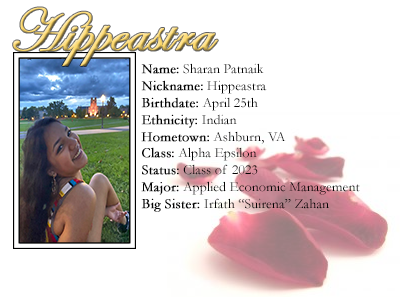
<style>
.page{position:relative;width:400px;height:300px;background:#ffffff}
.page>*{position:absolute;margin:0}
.t1{font:60px "EdwardianScriptITC";font-weight:bold}
.t2{font:14px "Garamond";color:#000000}
.t3{font:14px "Garamond";color:#000000;font-weight:bold}
</style>
<div class="page">
<p class="t1" style="left:13px;top:7px;width:205px;height:59px">Hippeastra</p>
<p class="t2" style="left:141px;top:63px;width:219px;height:149px"><span class="t3">Name:</span> Sharan Patnaik<br><span class="t3">Nickname:</span> Hippeastra<br><span class="t3">Birthdate:</span> April 25th<br><span class="t3">Ethnicity:</span> Indian<br><span class="t3">Hometown:</span> Ashburn, VA<br><span class="t3">Class:</span> Alpha Epsilon<br><span class="t3">Status:</span> Class of 2023<br><span class="t3">Major:</span> Applied Economic Management<br><span class="t3">Big Sister:</span> Irfath “Suirena” Zahan</p>
</div>
